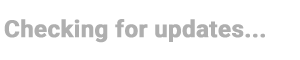
<style>
.page{position:relative;width:300px;height:60px;background:#ffffff}
.page>*{position:absolute;margin:0}
.t1{font:23.7px "Roboto-Bold";color:#afafaf;font-weight:bold}
</style>
<div class="page">
<p class="t1" style="left:4px;top:19px;width:261px;height:24px">Checking for updates...</p>
</div>
